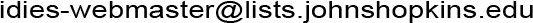
<style>
.page{position:relative;width:533px;height:23px;background:#ffffff}
.page>*{position:absolute;margin:0}
.t1{font:24px "ArialMT";letter-spacing:0.014em;color:#000000;scale:1.2 1}
</style>
<div class="page">
<p class="t1" style="left:0px;top:0px;width:533px;height:23px">idies-webmaster@lists.johnshopkins.edu</p>
</div>
